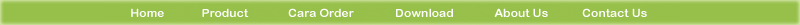
<style>
.page{position:relative;width:800px;height:25px;background:#96c04a}
.page>*{position:absolute;margin:0}
.t1{font:11.3px "ArialRoundedMTBold";color:#fdfcfc;scale:1.07 1}
</style>
<div class="page">
<p class="t1" style="left:131px;top:8px;width:33px;height:9px">Home</p>
<p class="t1" style="left:202px;top:8px;width:47px;height:9px">Product</p>
<p class="t1" style="left:288px;top:8px;width:66px;height:9px">Cara Order</p>
<p class="t1" style="left:396px;top:8px;width:57px;height:9px">Download</p>
<p class="t1" style="left:494px;top:8px;width:54px;height:9px">About Us</p>
<p class="t1" style="left:582px;top:8px;width:65px;height:9px">Contact Us</p>
</div>
